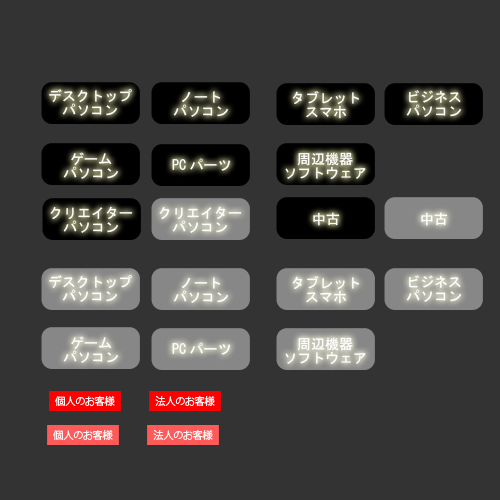
<style>
.page{position:relative;width:500px;height:500px;background:#333333}
.page>*{position:absolute;margin:0}
.t1{font:14px/14px "MS-Gothic";color:#ffffff}
.t2{font:14px "MS-Gothic";color:#ffffff}
.t3{font:14px/14px "MS-Gothic";color:#040202}
.t4{font:10.3px "KozGoPro-Regular";letter-spacing:-0.05em;color:#fff4f4}
</style>
<div class="page">
<p class="t1" style="left:49px;top:88px;width:83px;height:28px">デスクトップ<br>　パソコン</p>
<p class="t1" style="left:173px;top:91px;width:56px;height:26px">ノート<br>パソコン</p>
<p class="t1" style="left:292px;top:91px;width:67px;height:28px">タブレット<br>　スマホ</p>
<p class="t1" style="left:406px;top:90px;width:56px;height:27px">ビジネス<br>パソコン</p>
<p class="t1" style="left:63px;top:152px;width:56px;height:27px">ゲーム<br>パソコン</p>
<p class="t2" style="left:172px;top:158px;width:59px;height:13px">PCパーツ</p>
<p class="t1" style="left:285px;top:152px;width:81px;height:28px"><span class="t3">　</span>周辺機器<br>ソフトウェア</p>
<p class="t1" style="left:50px;top:206px;width:83px;height:27px">クリエイター<br>　パソコン</p>
<p class="t1" style="left:159px;top:206px;width:83px;height:27px">クリエイター<br>　パソコン</p>
<p class="t2" style="left:313px;top:212px;width:27px;height:14px">中古</p>
<p class="t2" style="left:421px;top:212px;width:27px;height:14px">中古</p>
<p class="t1" style="left:49px;top:274px;width:83px;height:28px">デスクトップ<br>　パソコン</p>
<p class="t1" style="left:173px;top:277px;width:56px;height:26px">ノート<br>パソコン</p>
<p class="t1" style="left:292px;top:276px;width:67px;height:28px">タブレット<br>　スマホ</p>
<p class="t1" style="left:406px;top:275px;width:56px;height:27px">ビジネス<br>パソコン</p>
<p class="t1" style="left:63px;top:336px;width:56px;height:27px">ゲーム<br>パソコン</p>
<p class="t2" style="left:172px;top:342px;width:59px;height:13px">PCパーツ</p>
<p class="t1" style="left:285px;top:337px;width:81px;height:28px">周辺機器<br>ソフトウェア</p>
<p class="t4" style="left:55px;top:396px;width:60px;height:10px">個人のお客様</p>
<p class="t4" style="left:155px;top:396px;width:60px;height:10px">法人のお客様</p>
<p class="t4" style="left:53px;top:430px;width:60px;height:10px">個人のお客様</p>
<p class="t4" style="left:153px;top:430px;width:60px;height:10px">法人のお客様</p>
</div>
